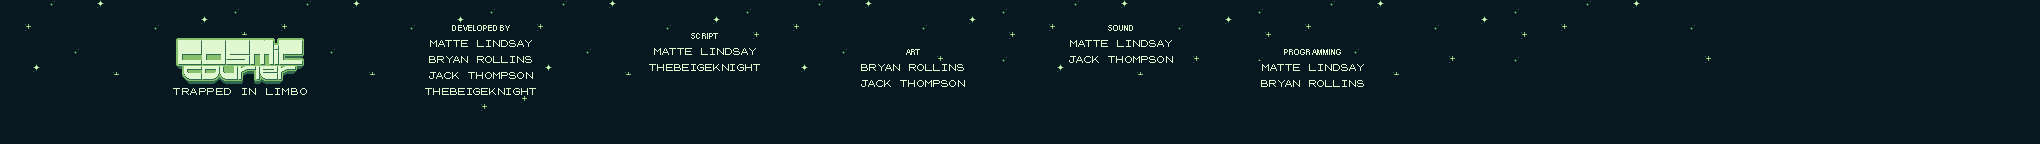
<style>
.page{position:relative;width:2040px;height:144px;background:#071821}
.page>*{position:absolute;margin:0}
.t1{font:8px/16px "PokemonGB";color:#e0f8cf;text-transform:uppercase}
.t2{font:9px/6px "ArialNarrow";color:#e0f8cf;text-transform:uppercase}
.t3{font:8px/11px "PokemonGB";color:#e0f8cf;text-transform:uppercase}
.t4{font:8px/14px "PokemonGB";color:#e0f8cf;text-transform:uppercase}
</style>
<div class="page">
<p class="t1" style="left:425px;top:25px;width:111px;height:70px;text-align:center"><span class="t2">developed by<br><br></span>Matte Lindsay<br>Bryan Rollins<br>Jack Thompson<br><span class="t3">TheBeigeKnight</span></p>
<p class="t1" style="left:1069px;top:25px;width:104px;height:38px;text-align:center"><span class="t2">sound<br><br></span>Matte Lindsay<br><span class="t3">Jack Thompson</span></p>
<p class="t3" style="left:649px;top:33px;width:111px;height:38px;text-align:center"><span class="t2">script<br><br></span><span class="t1">Matte Lindsay<br></span>TheBeigeKnight</p>
<p class="t1" style="left:861px;top:49px;width:104px;height:38px;text-align:center"><span class="t2">art<br><br></span>Bryan Rollins<br><span class="t4">Jack Thompson</span></p>
<p class="t1" style="left:1261px;top:49px;width:103px;height:38px;text-align:center"><span class="t2">programming<br><br></span>Matte Lindsay<br><span class="t3">Bryan Rollins</span></p>
</div>
